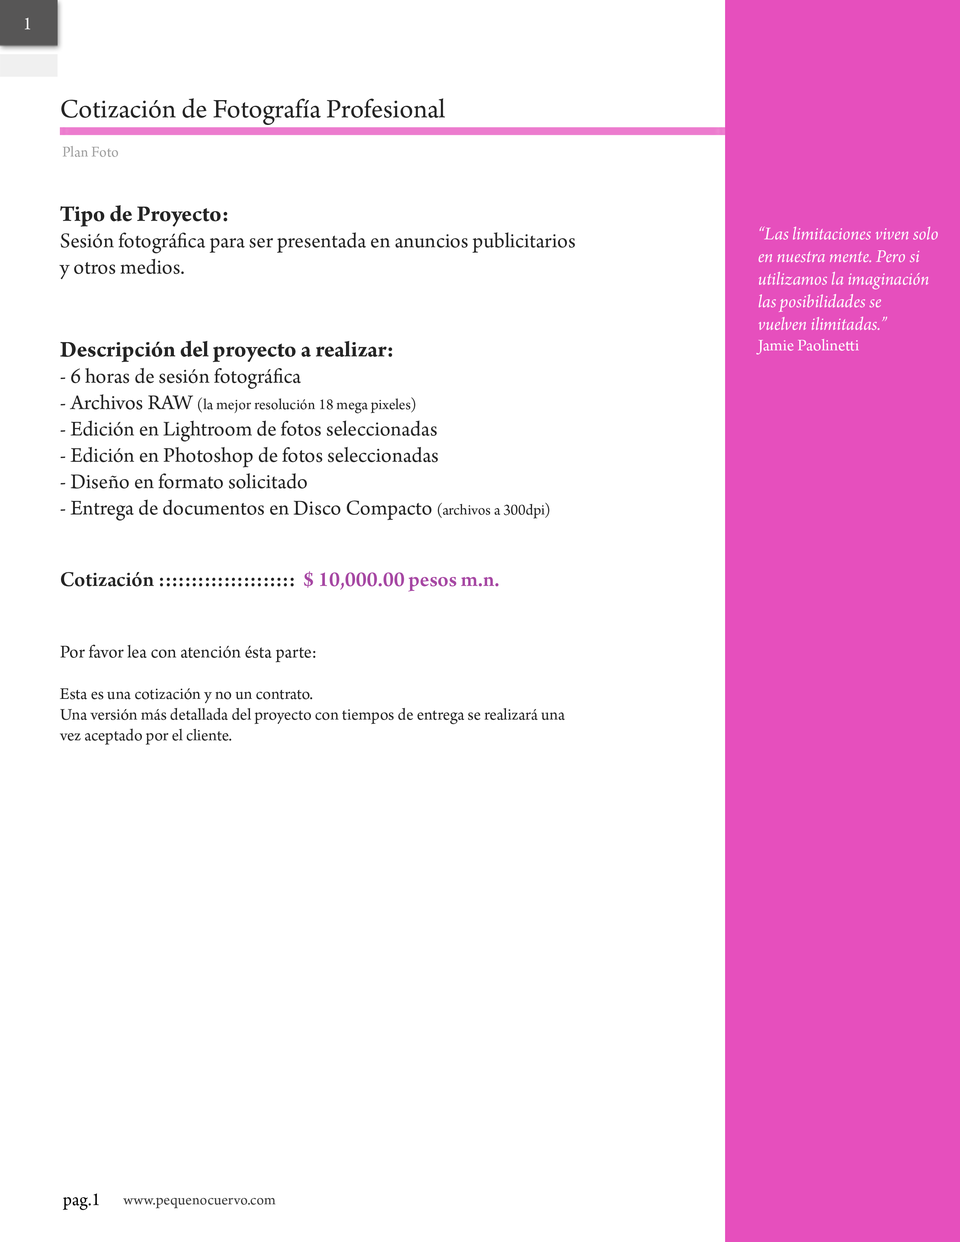
<style>
.page{position:relative;width:960px;height:1242px;background:#ffffff}
.page>*{position:absolute;margin:0}
.t1{font:18.8px "ArnoPro-Regular";color:#fcfcfc}
.t2{font:28.2px "ArnoPro-Regular";color:#252525}
.t3{font:15.7px "ArnoPro-Regular";color:#a0a0a0}
.t4{font:22px "ArnoPro-Regular";color:#252525}
.t5{font:23.5px "ArnoPro-Regular";color:#252525}
.t6{font:23.5px "ArnoPro-Bold";color:#252525}
.t7{font:15.7px "ArnoPro-Regular";color:#252525}
.t8{font:22px "ArnoPro-Smbd";color:#252525}
.t9{font:22px "ArnoPro-Smbd";color:#a647a3}
.t10{font:18.8px "ArnoPro-Regular";color:#252525}
.t11{font:17.3px "ArnoPro-Regular";color:#252525}
.t12{font:18.8px "ArnoPro-Italic";color:#ffffff}
.t13{font:17.3px "ArnoPro-Regular";color:#ffffff}
.t14{font:18.8px "ArnoPro-Regular";color:#010101}
.t15{font:15.7px "ArnoPro-Regular";color:#3c3c3c}
</style>
<div class="page">
<p class="t1" style="left:25px;top:18px;width:5px;height:11px">1</p>
<p class="t2" style="left:61px;top:98px;width:384px;height:27px">Cotización de Fotografía Profesional</p>
<p class="t3" style="left:62px;top:146px;width:56px;height:11px">Plan Foto</p>
<p class="t4" style="left:59px;top:205px;width:516px;height:540px"><span class="t5"><br></span><span class="t6">Tipo de Proyecto: <br></span>Sesión fotográfica para ser presentada en anuncios publicitarios<br>y otros medios.<br><br><br><span class="t6">Descripción del proyecto a realizar:<br></span>- 6 horas de sesión fotográfica <br>- Archivos RAW <span class="t7">(la mejor resolución 18 mega pixeles)<br></span>- Edición en Lightroom de fotos seleccionadas<br>- Edición en Photoshop de fotos seleccionadas<br>- Diseño en formato solicitado<br>- Entrega de documentos en Disco Compacto <span class="t7">(archivos a 300dpi)<br><br><br></span><span class="t8">Cotización :::::::::::::::::::::  </span><span class="t9">$ 10,000.00 pesos m.n.<br><br></span><span class="t10"><br>Por favor lea con atención ésta parte:</span><span class="t11"><br><br>Esta es una cotización y no un contrato.<br>Una versión más detallada del proyecto con tiempos de entrega se realizará una <br>vez aceptado por el cliente.</span></p>
<p class="t12" style="left:756px;top:226px;width:182px;height:129px">“Las limitaciones viven solo<br>en nuestra mente. Pero si <br>utilizamos la imaginación<br>las posibilidades se<br>vuelven ilimitadas.”<br><span class="t13">Jamie Paolinetti</span></p>
<p class="t14" style="left:63px;top:1194px;width:36px;height:16px">pag.1</p>
<p class="t15" style="left:123px;top:1198px;width:153px;height:11px">www.pequenocuervo.com</p>
</div>
